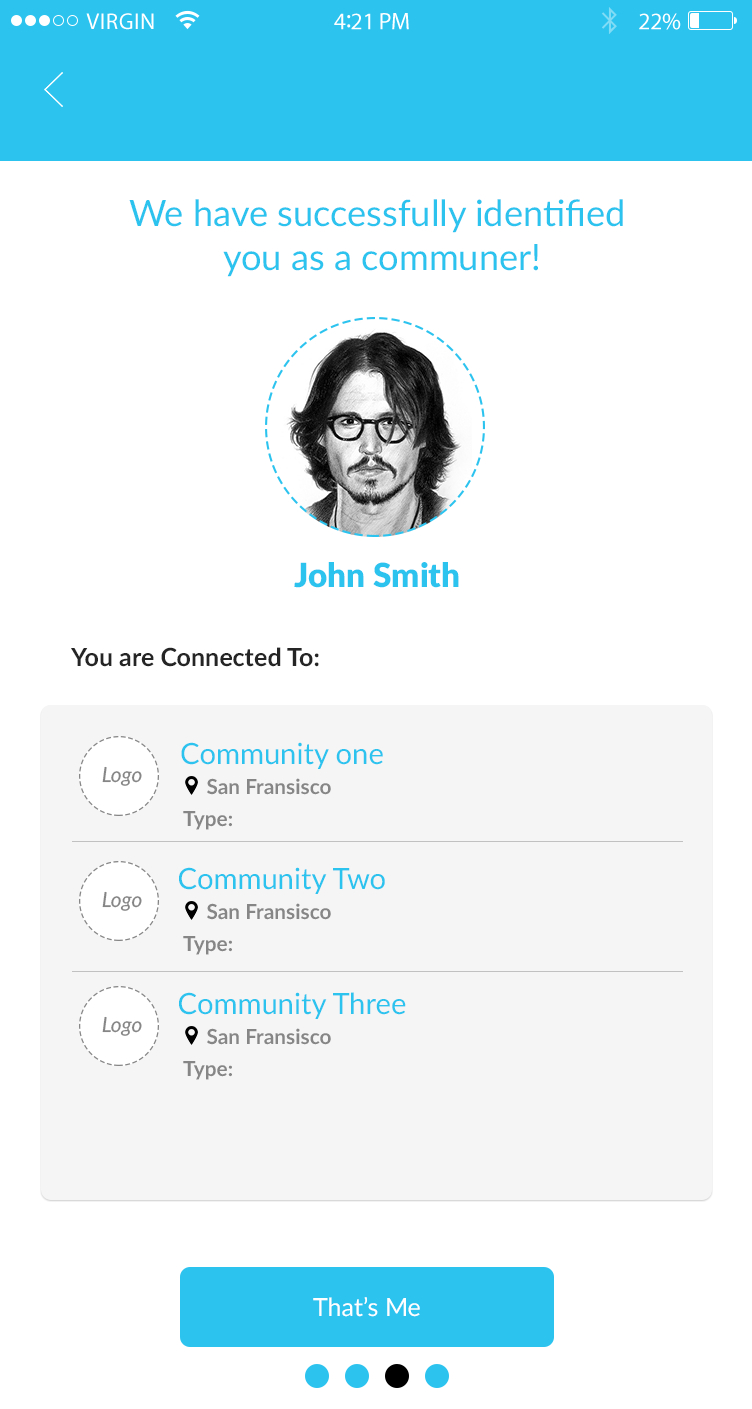
<style>
.page{position:relative;width:752px;height:1409px;background:#ffffff}
.page>*{position:absolute;margin:0}
.t1{font:23px "MyriadPro-Regular";letter-spacing:0.02em;color:#ffffff}
.t2{font:24px "MyriadPro-Regular";letter-spacing:-0.02em;color:#ffffff}
.t3{font:26px "MyriadPro-Regular";letter-spacing:-0.02em;color:#ffffff}
.t4{font:36.2px "Lato-Regular";color:#2cc3ef}
.t5{font:33.4px "Lato-Black";color:#2cc3ef}
.t6{font:25px "Lato-Bold";color:#252525}
.t7{font:29.2px "Lato-Regular";color:#2cc3ef}
.t8{font:20.8px "Lato-MediumItalic";color:#868686}
.t9{font:20.8px "Lato-Bold";color:#868686}
.t10{font:25px "Lato-Regular";color:#ffffff}
</style>
<div class="page">
<p class="t1" style="left:86px;top:13px;width:68px;height:17px">VIRGIN</p>
<p class="t2" style="left:334px;top:13px;width:75px;height:17px">4<span class="t3">:</span>21 PM</p>
<p class="t2" style="left:639px;top:13px;width:42px;height:17px">22%</p>
<p class="t4" style="left:129px;top:199px;width:494px;height:78px;text-align:center">We have successfully identified <br>you as a communer!</p>
<p class="t5" style="left:294px;top:562px;width:165px;height:26px">John Smith</p>
<p class="t6" style="left:71px;top:647px;width:248px;height:20px">You are Connected To:</p>
<p class="t7" style="left:181px;top:742px;width:202px;height:27px">Community one</p>
<p class="t8" style="left:102px;top:766px;width:40px;height:20px">Logo</p>
<p class="t9" style="left:207px;top:778px;width:124px;height:17px">San Fransisco</p>
<p class="t9" style="left:183px;top:811px;width:49px;height:19px">Type:</p>
<p class="t7" style="left:179px;top:867px;width:206px;height:27px">Community Two</p>
<p class="t8" style="left:102px;top:891px;width:40px;height:20px">Logo</p>
<p class="t9" style="left:207px;top:903px;width:124px;height:17px">San Fransisco</p>
<p class="t9" style="left:183px;top:936px;width:49px;height:19px">Type:</p>
<p class="t7" style="left:179px;top:992px;width:227px;height:27px">Community Three</p>
<p class="t8" style="left:102px;top:1016px;width:40px;height:20px">Logo</p>
<p class="t9" style="left:207px;top:1028px;width:124px;height:17px">San Fransisco</p>
<p class="t9" style="left:183px;top:1061px;width:49px;height:19px">Type:</p>
<p class="t10" style="left:313px;top:1297px;width:107px;height:20px">That’s Me</p>
</div>
